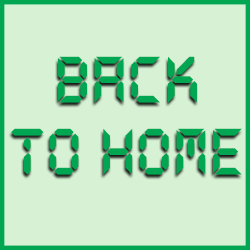
<style>
.page{position:relative;width:250px;height:250px;background:#d6f1d3}
.page>*{position:absolute;margin:0}
.t1{font:72px/72px "DS-Digital-Bold";color:#00a651}
</style>
<div class="page">
<p class="t1" style="left:11px;top:56px;width:231px;height:119px;text-align:center">Back<br>to Home</p>
</div>
